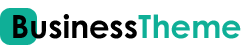
<style>
.page{position:relative;width:242px;height:55px;background:#ffffff}
.page>*{position:absolute;margin:0}
.t1{font:32px "CenturyGothic-Bold";color:#000000}
.t2{font:32px "CenturyGothic-Bold";color:#0faf97}
</style>
<div class="page">
<p class="t1" style="left:13px;top:14px;width:228px;height:25px">Business<span class="t2">Theme</span></p>
</div>
